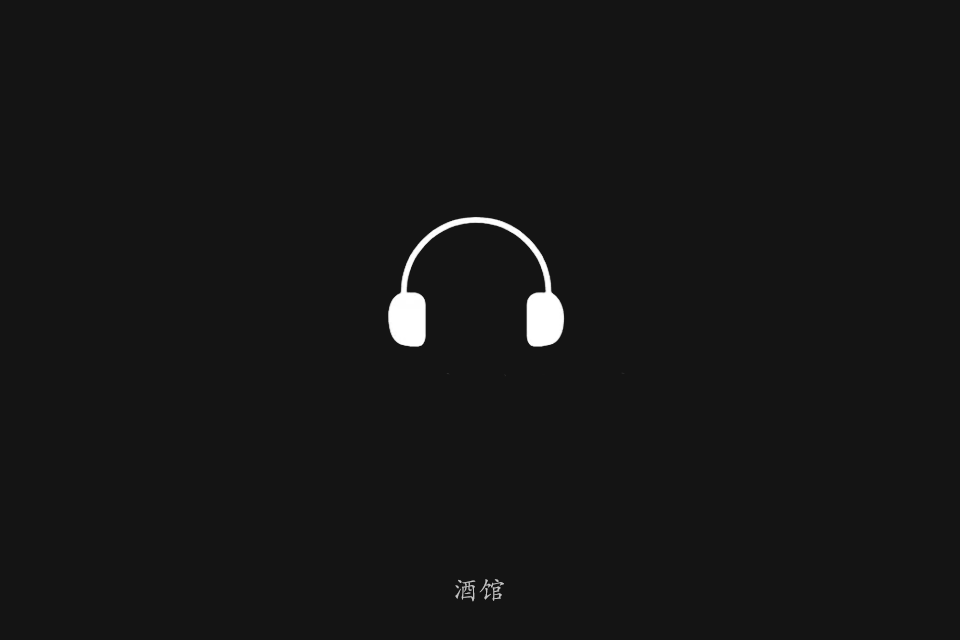
<style>
.page{position:relative;width:960px;height:640px;background:#141414}
.page>*{position:absolute;margin:0}
.t1{font:26.7px "STKaiti";color:#c2c2c2}
</style>
<div class="page">
<p class="t1" style="left:455px;top:579px;width:49px;height:23px">酒馆</p>
</div>
